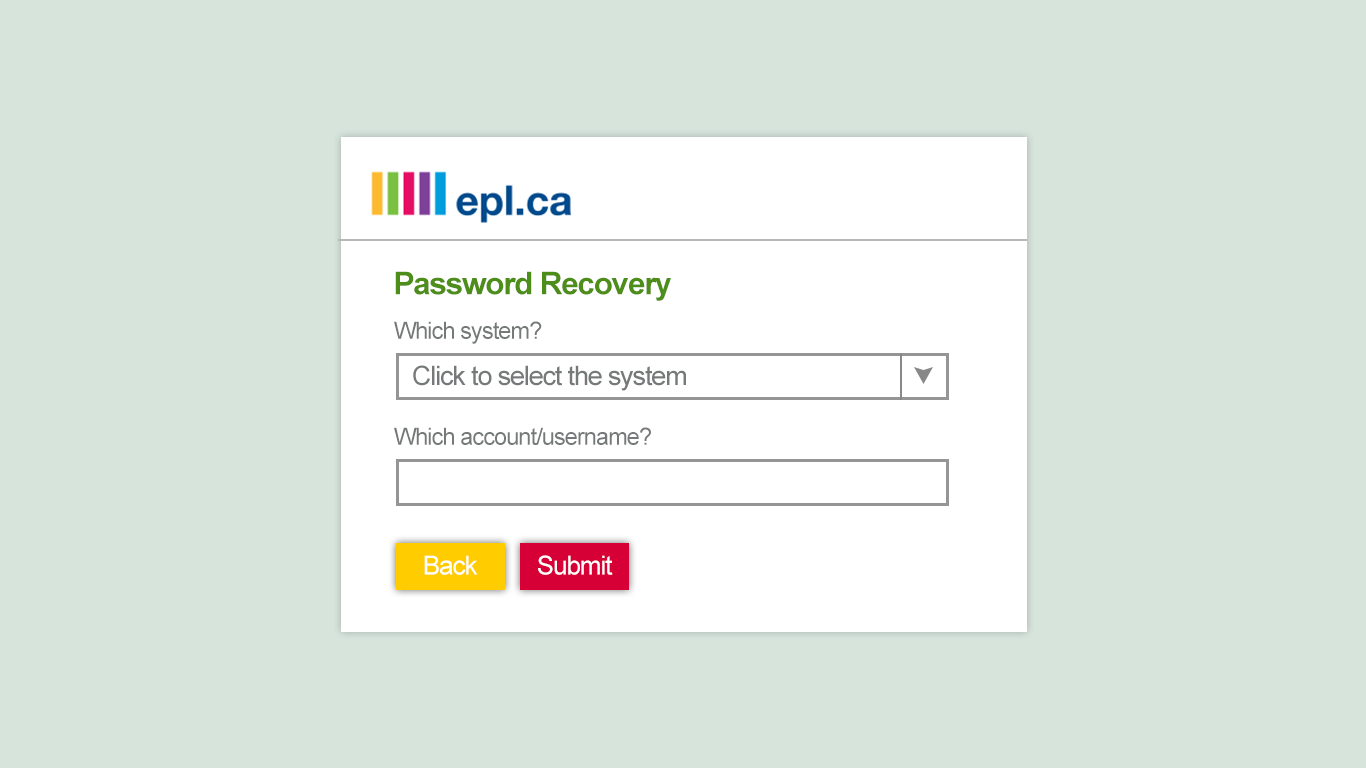
<style>
.page{position:relative;width:1366px;height:768px;background:#d6e4dc}
.page>*{position:absolute;margin:0}
.t1{font:31.5px "Arial-BoldMT";letter-spacing:-0.04em;color:#4d8d1a}
.t2{font:23.6px "ArialMT";letter-spacing:-0.04em;color:#767979}
.t3{font:26.8px "ArialMT";letter-spacing:-0.04em;color:#767979}
.t4{font:26px "ArialMT";letter-spacing:-0.04em;color:#ffffff}
</style>
<div class="page">
<p class="t1" style="left:395px;top:271px;width:276px;height:30px">Password Recovery</p>
<p class="t2" style="left:394px;top:321px;width:148px;height:23px">Which system?</p>
<p class="t3" style="left:413px;top:365px;width:273px;height:26px">Click to select the system</p>
<p class="t2" style="left:394px;top:427px;width:257px;height:18px">Which account/username?</p>
<p class="t4" style="left:424px;top:555px;width:54px;height:20px">Back</p>
<p class="t4" style="left:538px;top:555px;width:75px;height:20px">Submit</p>
</div>
